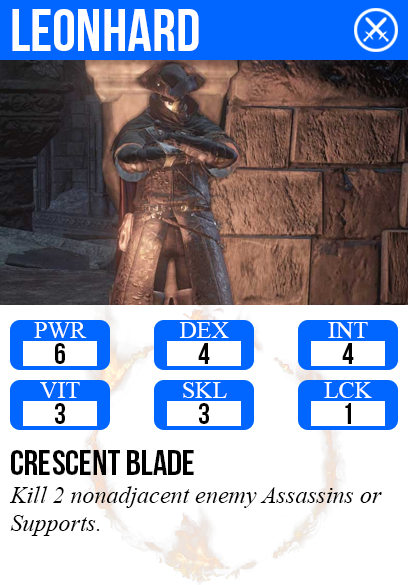
<style>
.page{position:relative;width:408px;height:585px;background:#ffffff}
.page>*{position:absolute;margin:0}
.t1{font:60px "BebasNeue";color:#ffffff}
.t2{font:24px "TimesNewRomanPSMT";color:#ffffff}
.t3{font:30px "BebasNeue";color:#000000}
.t4{font:36px "BebasNeue";color:#000000}
.t5{font:24px "TimesNewRomanPS-ItalicMT";color:#000000}
</style>
<div class="page">
<p class="t1" style="left:12px;top:9px;width:187px;height:42px">leonhard</p>
<p class="t2" style="left:34px;top:322px;width:53px;height:16px">PWR</p>
<p class="t2" style="left:179px;top:322px;width:50px;height:16px">DEX</p>
<p class="t2" style="left:328px;top:322px;width:40px;height:17px">INT</p>
<p class="t3" style="left:55px;top:343px;width:10px;height:21px">6</p>
<p class="t3" style="left:198px;top:343px;width:12px;height:21px">4</p>
<p class="t3" style="left:342px;top:343px;width:12px;height:21px">4</p>
<p class="t2" style="left:40px;top:382px;width:40px;height:16px">VIT</p>
<p class="t2" style="left:183px;top:382px;width:44px;height:16px">SKL</p>
<p class="t2" style="left:324px;top:382px;width:48px;height:16px">LCK</p>
<p class="t3" style="left:55px;top:403px;width:10px;height:21px">3</p>
<p class="t3" style="left:199px;top:403px;width:10px;height:21px">3</p>
<p class="t3" style="left:345px;top:403px;width:6px;height:21px">1</p>
<p class="t4" style="left:11px;top:450px;width:183px;height:25px">crescent blade</p>
<p class="t5" style="left:9px;top:486px;width:373px;height:50px">Kill 2 nonadjacent enemy Assassins or<br>Supports.</p>
</div>
